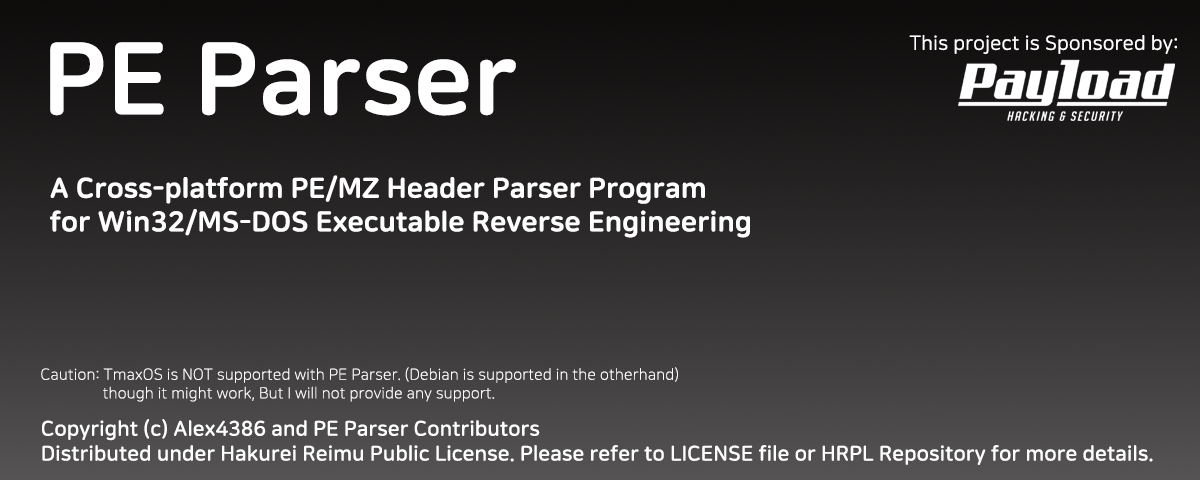
<style>
.page{position:relative;width:1200px;height:480px}
.page>*{position:absolute;margin:0}
.t1{font:20px "NanumSquareRoundR";color:#ffffff}
.t2{font:101.6px "NanumSquareRoundEB";color:#ffffff}
.t3{font:28px "NanumSquareRoundEB";color:#ffffff}
.t4{font:15.5px "NanumSquareRoundL";color:#ffffff}
.t5{font:20.7px "NanumSquareRoundB";color:#ffffff}
</style>
<div class="page">
<p class="t1" style="left:909px;top:35px;width:268px;height:19px">This project is Sponsored by:</p>
<p class="t2" style="left:50px;top:42px;width:466px;height:74px">PE Parser</p>
<p class="t3" style="left:50px;top:175px;width:700px;height:63px">A Cross-platform PE/MZ Header Parser Program<br>for Win32/MS-DOS Executable Reverse Engineering</p>
<p class="t4" style="left:41px;top:367px;width:637px;height:35px">Caution: TmaxOS is NOT supported with PE Parser. (Debian is supported in the otherhand)<br>                though it might work, But I will not provide any support.</p>
<p class="t5" style="left:42px;top:419px;width:1111px;height:46px">Copyright (c) Alex4386 and PE Parser Contributors<br>Distributed under Hakurei Reimu Public License. Please refer to LICENSE file or HRPL Repository for more details.</p>
</div>
